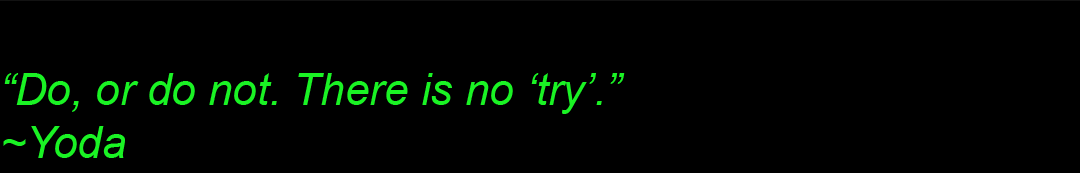
<style>
.page{position:relative;width:1080px;height:173px;background:#000000}
.page>*{position:absolute;margin:0}
.t1{font:44px "Arial-ItalicMT";color:#1af324}
</style>
<div class="page">
<p class="t1" style="left:3px;top:73px;width:622px;height:85px">“Do, or do not. There is no ‘try’.”<br>~Yoda</p>
</div>
